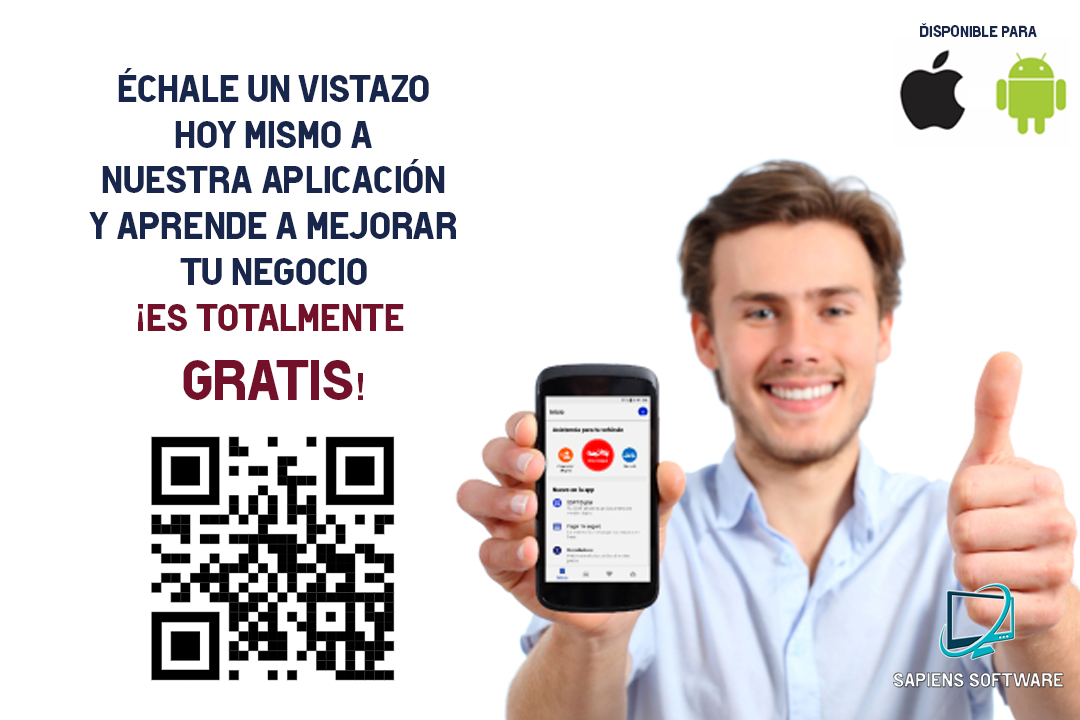
<style>
.page{position:relative;width:1080px;height:720px;background:#ffffff}
.page>*{position:absolute;margin:0}
.t1{font:16px "HotelDeParisXe";color:#18264c}
.t2{font:38.2px "HotelDeParisXe";color:#18264c}
.t3{font:38.2px "HotelDeParisXe";color:#73102a}
.t4{font:57.2px "HotelDeParisXe";color:#73102a}
</style>
<div class="page">
<p class="t1" style="left:920px;top:23px;width:117px;height:14px">Disponible para</p>
<p class="t2" style="left:89px;top:68px;width:367px;height:332px;text-align:center">échale un vistazo<br> hoy mismo a <br>Nuestra aplicación<br>y aprende a mejorar<br>tu negocio<br><span class="t3">¡Es totalmente <br></span><span class="t4">gratis</span><span class="t3">!</span></p>
</div>
